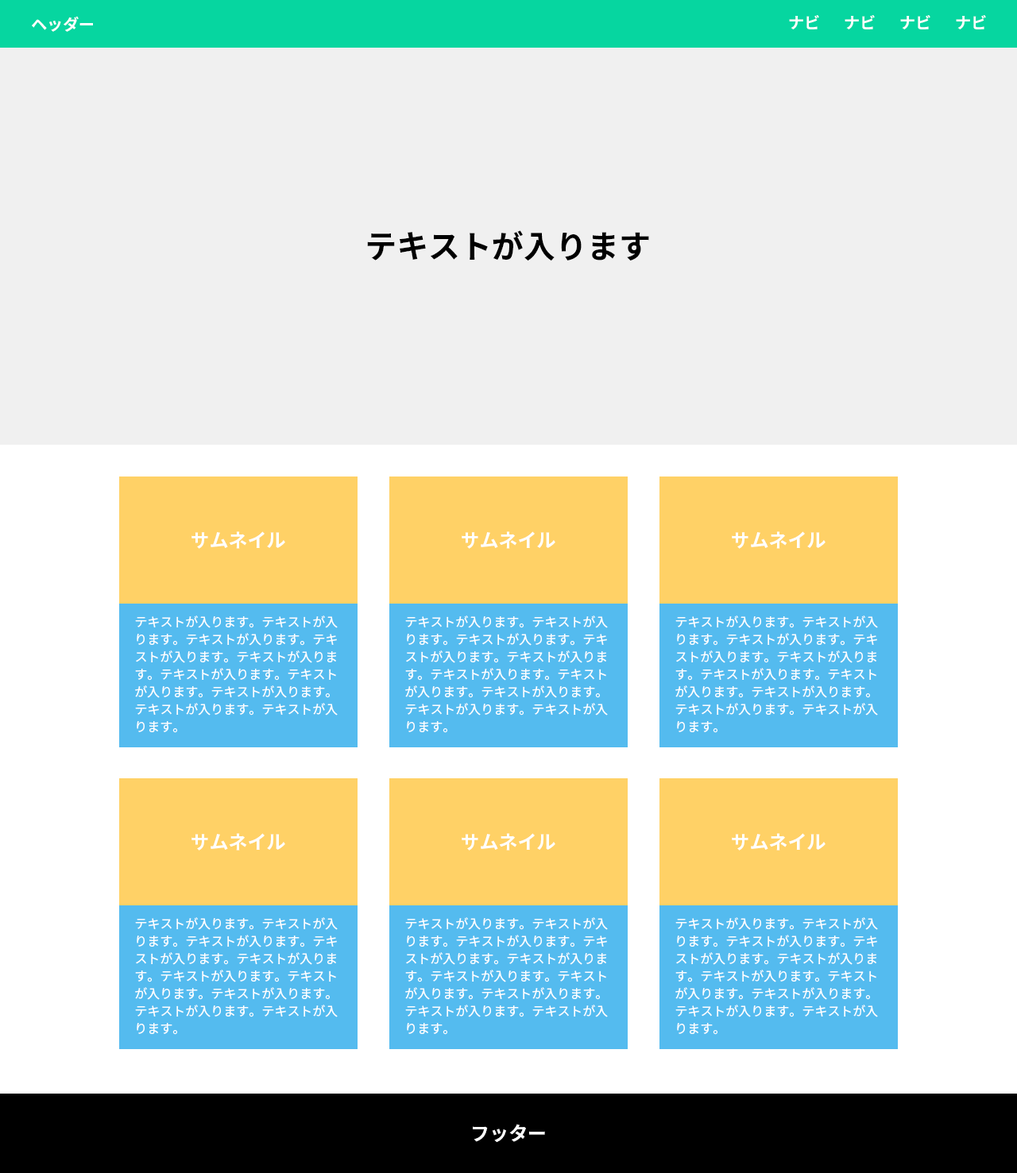
<style>
.page{position:relative;width:1017px;height:1173px;background:#f0f0f0}
.page>*{position:absolute;margin:0}
.t1{font:15.9px "NotoSansJP-Bold";color:#ffffff}
.t2{font:31.8px "NotoSansJP-Bold";color:#000000}
.t3{font:19.1px "NotoSansJP-Bold";color:#ffffff}
.t4{font:12.7px/17.5px "NotoSansJP-Regular";color:#ffffff}
</style>
<div class="page">
<p class="t1" style="left:32px;top:16px;width:61px;height:16px">ヘッダー</p>
<p class="t1" style="left:789px;top:15px;width:30px;height:14px">ナビ</p>
<p class="t1" style="left:844px;top:15px;width:30px;height:14px">ナビ</p>
<p class="t1" style="left:900px;top:15px;width:30px;height:14px">ナビ</p>
<p class="t1" style="left:955px;top:15px;width:31px;height:14px">ナビ</p>
<p class="t2" style="left:367px;top:230px;width:282px;height:31px">テキストが入ります</p>
<p class="t3" style="left:191px;top:531px;width:94px;height:18px">サムネイル</p>
<p class="t3" style="left:461px;top:531px;width:94px;height:18px">サムネイル</p>
<p class="t3" style="left:731px;top:531px;width:94px;height:18px">サムネイル</p>
<p class="t4" style="left:135px;top:615px;width:203px;height:118px">テキストが入ります。テキストが入ります。テキストが入ります。テキストが入ります。テキストが入ります。テキストが入ります。テキストが入ります。テキストが入ります。テキストが入ります。テキストが入ります。</p>
<p class="t4" style="left:405px;top:615px;width:203px;height:118px">テキストが入ります。テキストが入ります。テキストが入ります。テキストが入ります。テキストが入ります。テキストが入ります。テキストが入ります。テキストが入ります。テキストが入ります。テキストが入ります。</p>
<p class="t4" style="left:675px;top:615px;width:203px;height:118px">テキストが入ります。テキストが入ります。テキストが入ります。テキストが入ります。テキストが入ります。テキストが入ります。テキストが入ります。テキストが入ります。テキストが入ります。テキストが入ります。</p>
<p class="t3" style="left:191px;top:833px;width:94px;height:18px">サムネイル</p>
<p class="t3" style="left:461px;top:833px;width:94px;height:18px">サムネイル</p>
<p class="t3" style="left:731px;top:833px;width:94px;height:18px">サムネイル</p>
<p class="t4" style="left:135px;top:917px;width:203px;height:118px">テキストが入ります。テキストが入ります。テキストが入ります。テキストが入ります。テキストが入ります。テキストが入ります。テキストが入ります。テキストが入ります。テキストが入ります。テキストが入ります。</p>
<p class="t4" style="left:405px;top:917px;width:203px;height:118px">テキストが入ります。テキストが入ります。テキストが入ります。テキストが入ります。テキストが入ります。テキストが入ります。テキストが入ります。テキストが入ります。テキストが入ります。テキストが入ります。</p>
<p class="t4" style="left:675px;top:917px;width:203px;height:118px">テキストが入ります。テキストが入ります。テキストが入ります。テキストが入ります。テキストが入ります。テキストが入ります。テキストが入ります。テキストが入ります。テキストが入ります。テキストが入ります。</p>
<p class="t3" style="left:473px;top:1124px;width:72px;height:18px">フッター</p>
</div>
